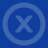
<style>
.page{position:relative;width:48px;height:48px;background:#103e9c}
.page>*{position:absolute;margin:0}
.t1{font:24px "DaysOne-Regular";color:#4065b0}
</style>
<div class="page">
<p class="t1" style="left:15px;top:15px;width:18px;height:18px">X</p>
</div>
